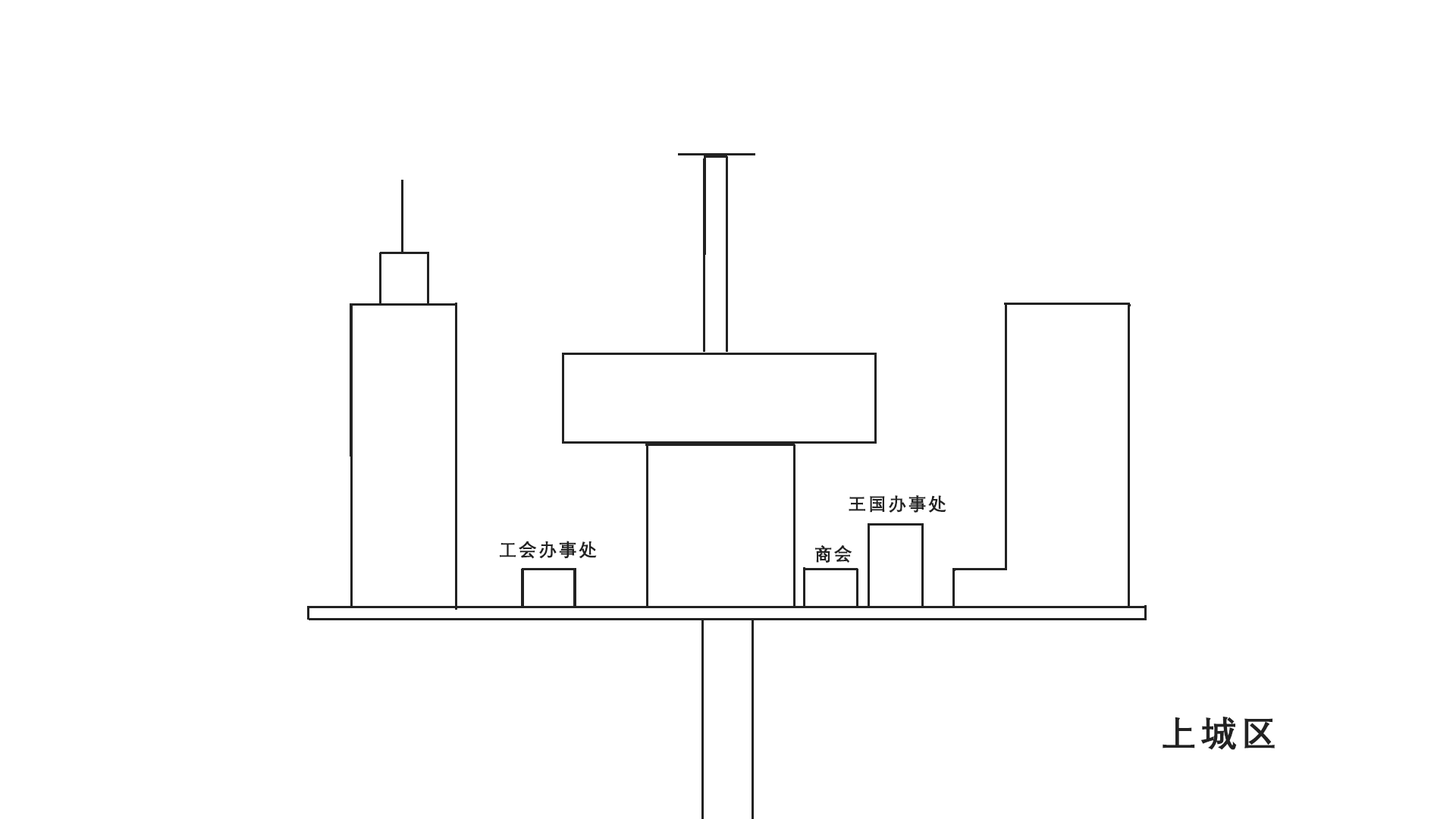
<style>
.page{position:relative;width:1456px;height:819px;background:#ffffff}
.page>*{position:absolute;margin:0}
.t1{font:18.2px "DengXian-Bold";letter-spacing:0.1em;color:#222222}
.t2{font:36.4px "DengXian-Bold";letter-spacing:0.1em;color:#222222}
</style>
<div class="page">
<p class="t1" style="left:849px;top:495px;width:97px;height:18px">王国办事处</p>
<p class="t1" style="left:500px;top:541px;width:97px;height:18px">工会办事处</p>
<p class="t1" style="left:815px;top:544px;width:37px;height:19px">商会</p>
<p class="t2" style="left:1163px;top:717px;width:112px;height:33px">上城区</p>
</div>
